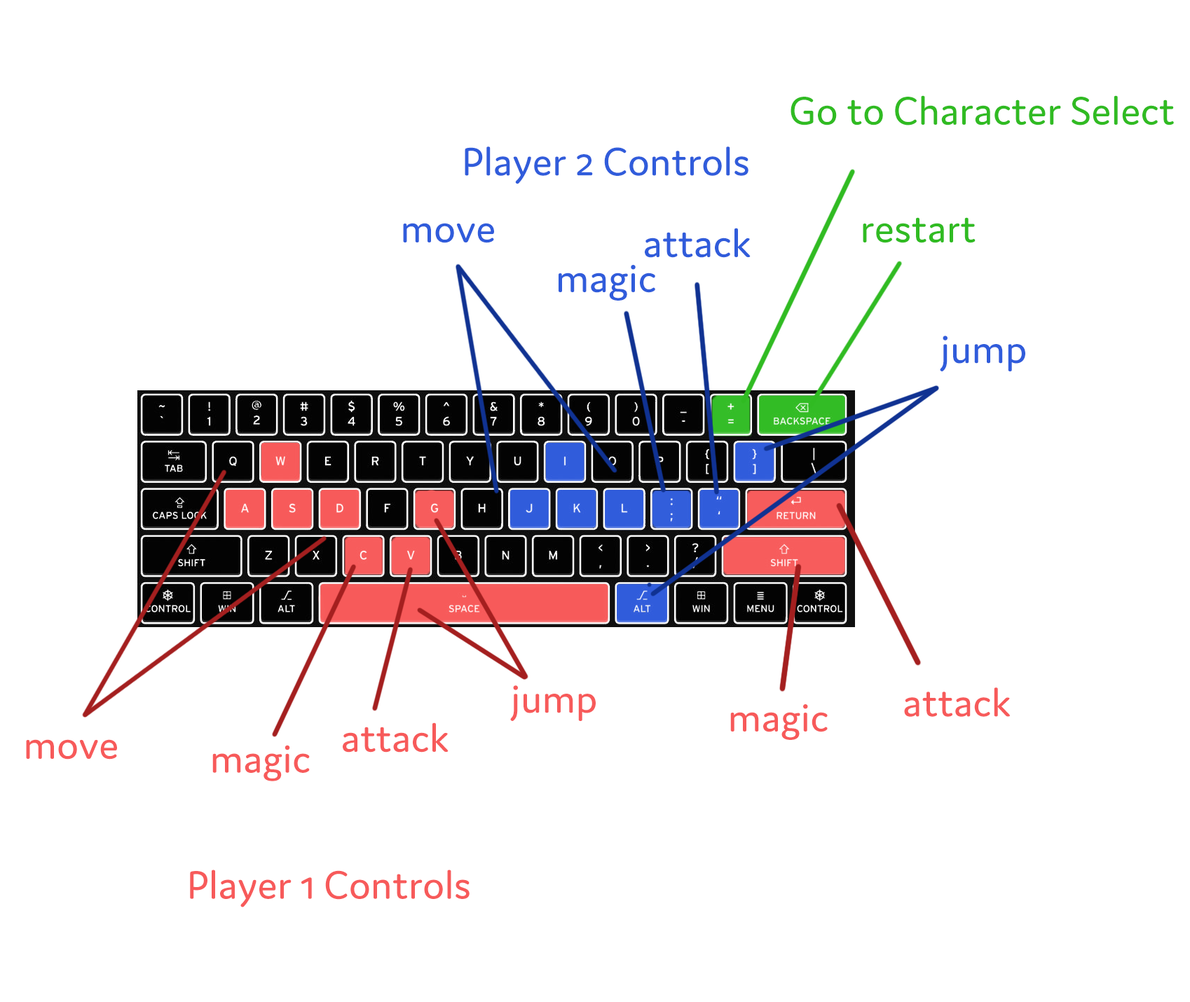
<style>
.page{position:relative;width:1190px;height:1002px;background:#ffffff}
.page>*{position:absolute;margin:0}
.t1{font:42px "Domus-Regular";color:#30bb22}
.t2{font:42px "Domus-Regular";color:#305cdb}
.t3{font:42px "Domus-Regular";color:#f75a5a}
</style>
<div class="page">
<p class="t1" style="left:790px;top:95px;width:384px;height:30px">Go to Character Select</p>
<p class="t2" style="left:465px;top:146px;width:283px;height:38px">Player 2 Controls</p>
<p class="t1" style="left:863px;top:217px;width:112px;height:26px">restart</p>
<p class="t2" style="left:403px;top:223px;width:91px;height:20px">move</p>
<p class="t2" style="left:645px;top:228px;width:106px;height:30px">attack</p>
<p class="t2" style="left:559px;top:265px;width:96px;height:36px">magic</p>
<p class="t2" style="left:940px;top:336px;width:85px;height:35px">jump</p>
<p class="t3" style="left:510px;top:685px;width:86px;height:36px">jump</p>
<p class="t3" style="left:904px;top:687px;width:106px;height:30px">attack</p>
<p class="t3" style="left:730px;top:704px;width:98px;height:36px">magic</p>
<p class="t3" style="left:343px;top:723px;width:105px;height:30px">attack</p>
<p class="t3" style="left:26px;top:739px;width:91px;height:21px">move</p>
<p class="t3" style="left:212px;top:745px;width:98px;height:36px">magic</p>
<p class="t3" style="left:190px;top:870px;width:280px;height:38px">Player 1 Controls</p>
</div>
